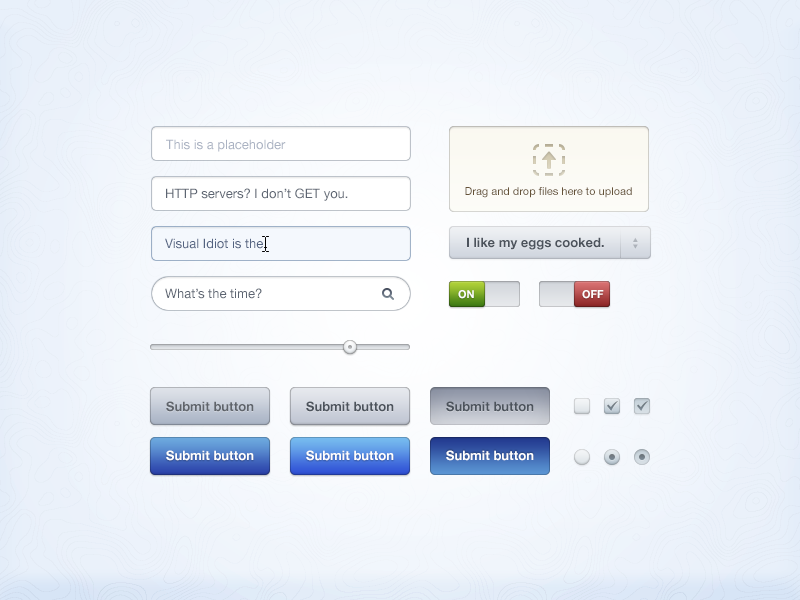
<style>
.page{position:relative;width:800px;height:600px}
.page>*{position:absolute;margin:0}
.t1{font:13px "HelveticaNeue";color:#abb3c3}
.t2{font:13px "HelveticaNeue";color:#5d6572}
.t3{font:11px "HelveticaNeue";color:#655237}
.t4{font:13px "HelveticaNeue";color:#536381}
.t5{font:13px "HelveticaNeue-Bold";color:#4c535c}
.t6{font:11px "ArialUnicodeMS";color:#b0b5bc}
.t7{font:11px "HelveticaNeue-Bold";color:#ffffff;text-transform:uppercase}
.t8{font:13px "HelveticaNeue-Bold";color:#5f646b}
.t9{font:13px "HelveticaNeue-Bold";color:#ffffff}
</style>
<div class="page">
<p class="t1" style="left:166px;top:139px;width:120px;height:13px">This is a placeholder</p>
<p class="t2" style="left:166px;top:188px;width:182px;height:13px">HTTP servers? I don’t GET you.</p>
<p class="t3" style="left:465px;top:187px;width:167px;height:11px">Drag and drop files here to upload</p>
<p class="t4" style="left:165px;top:238px;width:98px;height:11px">Visual Idiot is the</p>
<p class="t5" style="left:467px;top:237px;width:137px;height:13px">I like my eggs cooked.</p>
<p class="t6" style="left:633px;top:237px;width:5px;height:12px;rotate:90deg">◀▶</p>
<p class="t2" style="left:165px;top:288px;width:97px;height:11px">What’s the time?</p>
<p class="t7" style="left:458px;top:290px;width:16px;height:9px">On</p>
<p class="t7" style="left:582px;top:290px;width:22px;height:9px">Off</p>
<p class="t8" style="left:166px;top:401px;width:88px;height:11px">Submit button</p>
<p class="t5" style="left:306px;top:401px;width:88px;height:11px">Submit button</p>
<p class="t5" style="left:446px;top:401px;width:88px;height:11px">Submit button</p>
<p class="t9" style="left:166px;top:450px;width:88px;height:11px">Submit button</p>
<p class="t9" style="left:306px;top:450px;width:88px;height:11px">Submit button</p>
<p class="t9" style="left:446px;top:450px;width:88px;height:11px">Submit button</p>
</div>
